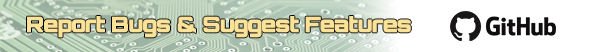
<style>
.page{position:relative;width:602px;height:52px;background:#ffffff}
.page>*{position:absolute;margin:0}
.t1{font:21.3px "Orbitron-Black";letter-spacing:-0.05em;color:#fae299;font-weight:bold}
</style>
<div class="page">
<p class="t1" style="left:27px;top:16px;width:384px;height:22px">Report Bugs &amp; Suggest Features</p>
</div>
